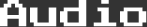
<style>
.page{position:relative;width:147px;height:27px;background:#333333}
.page>*{position:absolute;margin:0}
.t1{font:30px "PressStart2P";color:#ffffff}
</style>
<div class="page">
<p class="t1" style="left:0px;top:0px;width:147px;height:27px">Audio</p>
</div>
